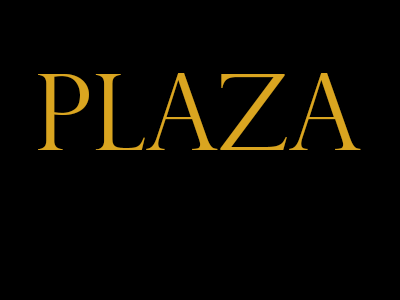
<style>
.page{position:relative;width:400px;height:300px;background:#000000}
.page>*{position:absolute;margin:0}
.t1{font:106.4px "PerpetuaTitlingMT-Light";color:#daa520}
</style>
<div class="page">
<p class="t1" style="left:38px;top:73px;width:323px;height:77px">PLAZA</p>
</div>
